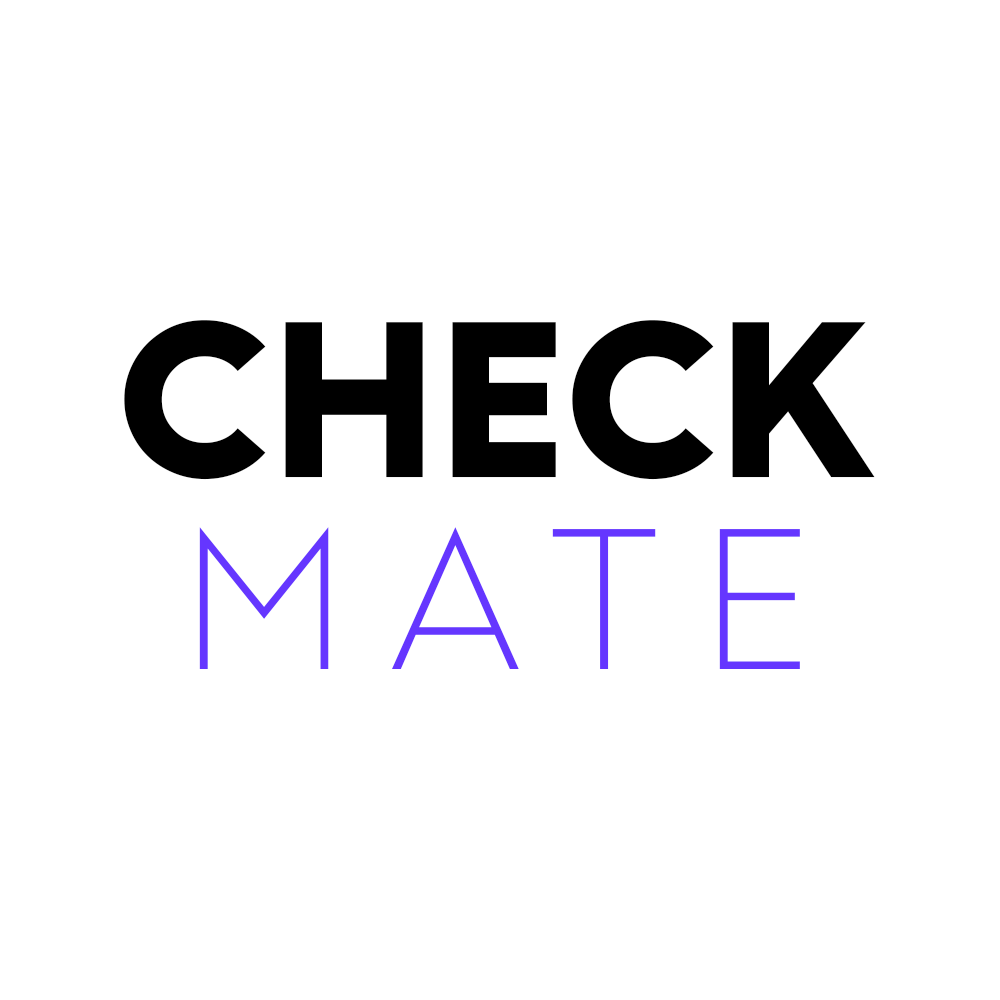
<style>
.page{position:relative;width:1000px;height:1000px;background:#ffffff}
.page>*{position:absolute;margin:0}
.t1{font:208.3px "Albula-Heavy";color:#000000}
.t2{font:187.5px "Albula-ExtraLight";letter-spacing:0.24em;color:#6536ff}
</style>
<div class="page">
<p class="t1" style="left:124px;top:320px;width:751px;height:160px">CHECK</p>
<p class="t2" style="left:199px;top:527px;width:601px;height:142px">MATE</p>
</div>
